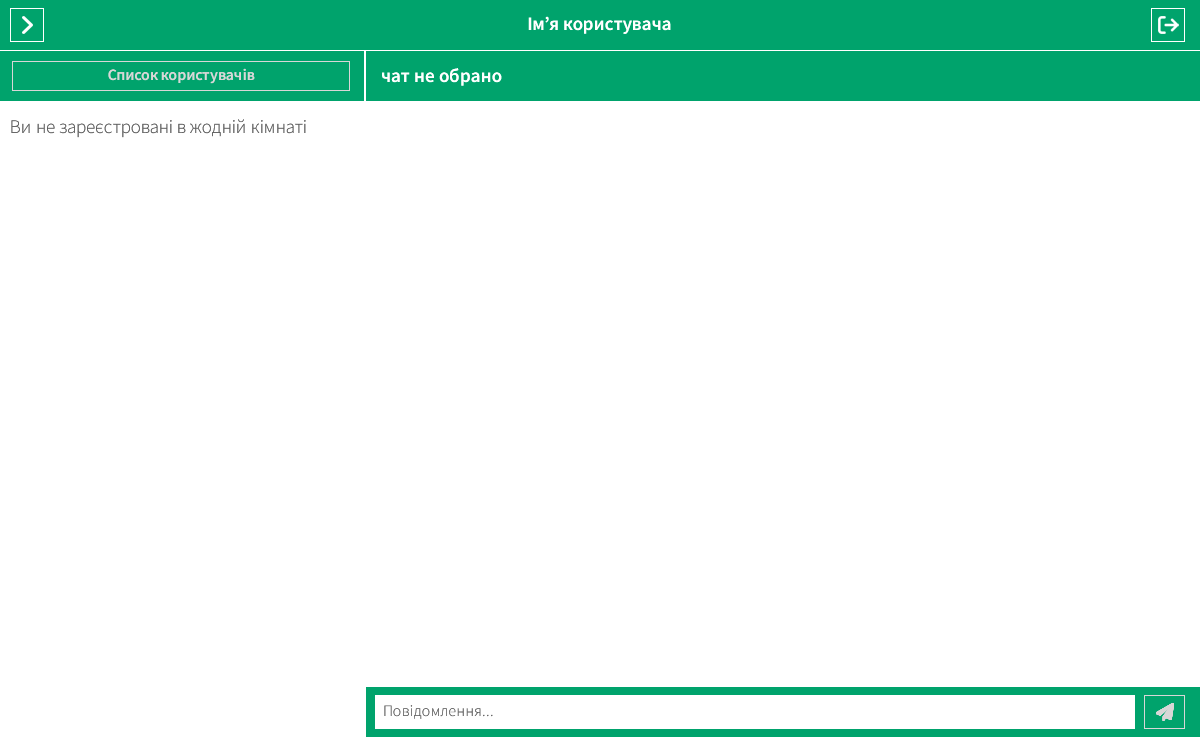
<style>
.page{position:relative;width:1200px;height:737px;background:#ffffff}
.page>*{position:absolute;margin:0}
.t1{font:32.7px "SourceSansPro-SemiBold";color:#ffffff}
.t2{font:27.2px "SourceSansPro-SemiBold";color:#d7d7d7}
.t3{font:32.7px "SourceSansPro-Light";color:#5d5d5d}
.t4{font:27.2px "SourceSansPro-Light";color:#5d5d5d}
</style>
<div class="page">
<p class="t1" style="left:528px;top:16px;width:143px;height:18px">Ім’я користувача</p>
<p class="t2" style="left:108px;top:68px;width:147px;height:16px">Список користувачів</p>
<p class="t1" style="left:382px;top:68px;width:120px;height:18px">чат не обрано</p>
<p class="t3" style="left:11px;top:119px;width:295px;height:19px">Ви не зареєстровані в жодній кімнаті</p>
<p class="t4" style="left:384px;top:705px;width:109px;height:14px">Повідомлення...</p>
</div>
